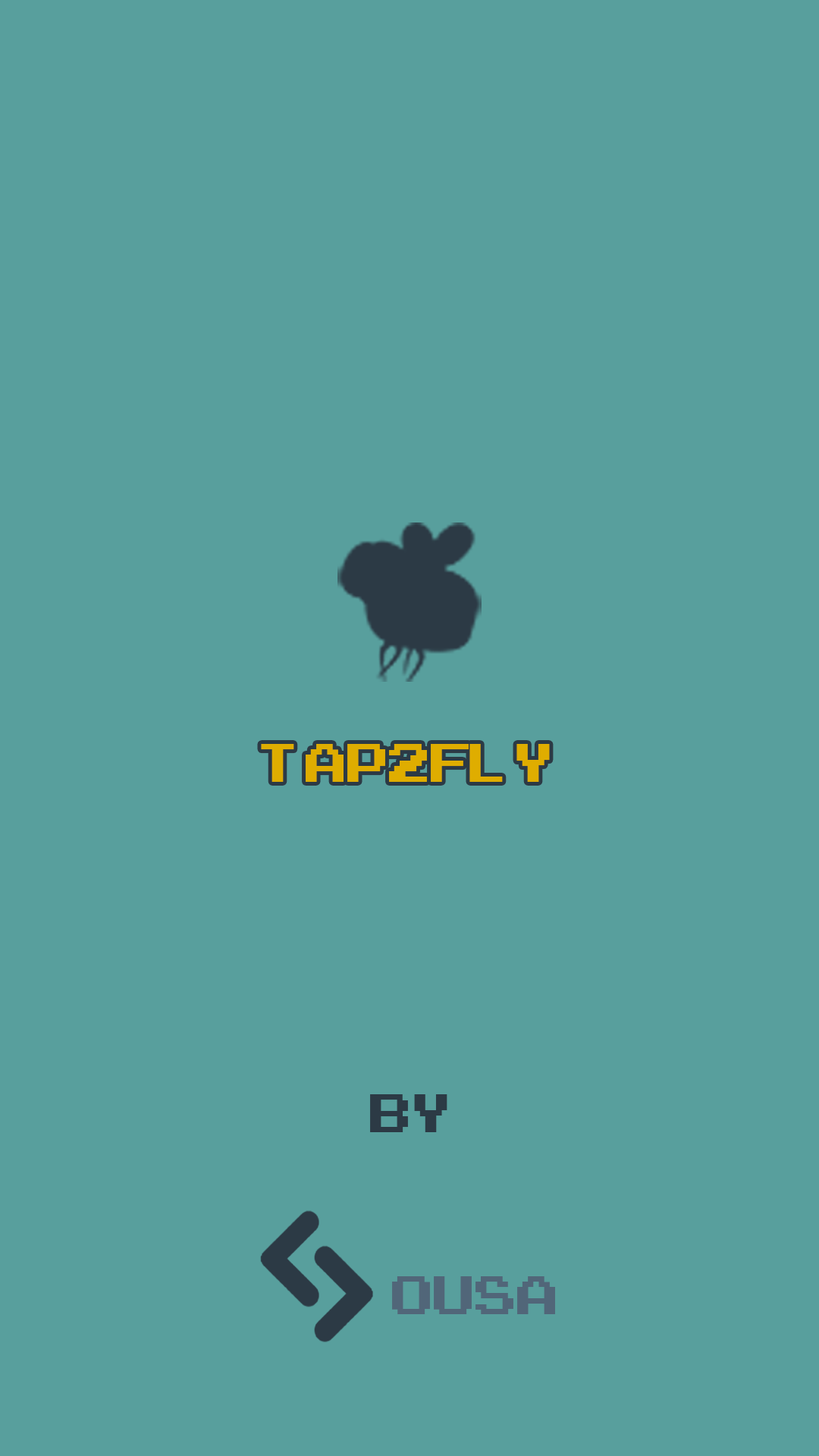
<style>
.page{position:relative;width:819px;height:1456px;background:#589f9d}
.page>*{position:absolute;margin:0}
.t1{font:75.8px "ArcadeClassic";color:#dfad00}
.t2{font:75.8px "ArcadeClassic";color:#2c3a45}
.t3{font:75.8px "ArcadeClassic";color:#516679}
</style>
<div class="page">
<p class="t1" style="left:261px;top:744px;width:289px;height:38px">tap2fly</p>
<p class="t2" style="left:370px;top:1094px;width:77px;height:38px">by</p>
<p class="t3" style="left:392px;top:1276px;width:163px;height:38px">ousa</p>
</div>
